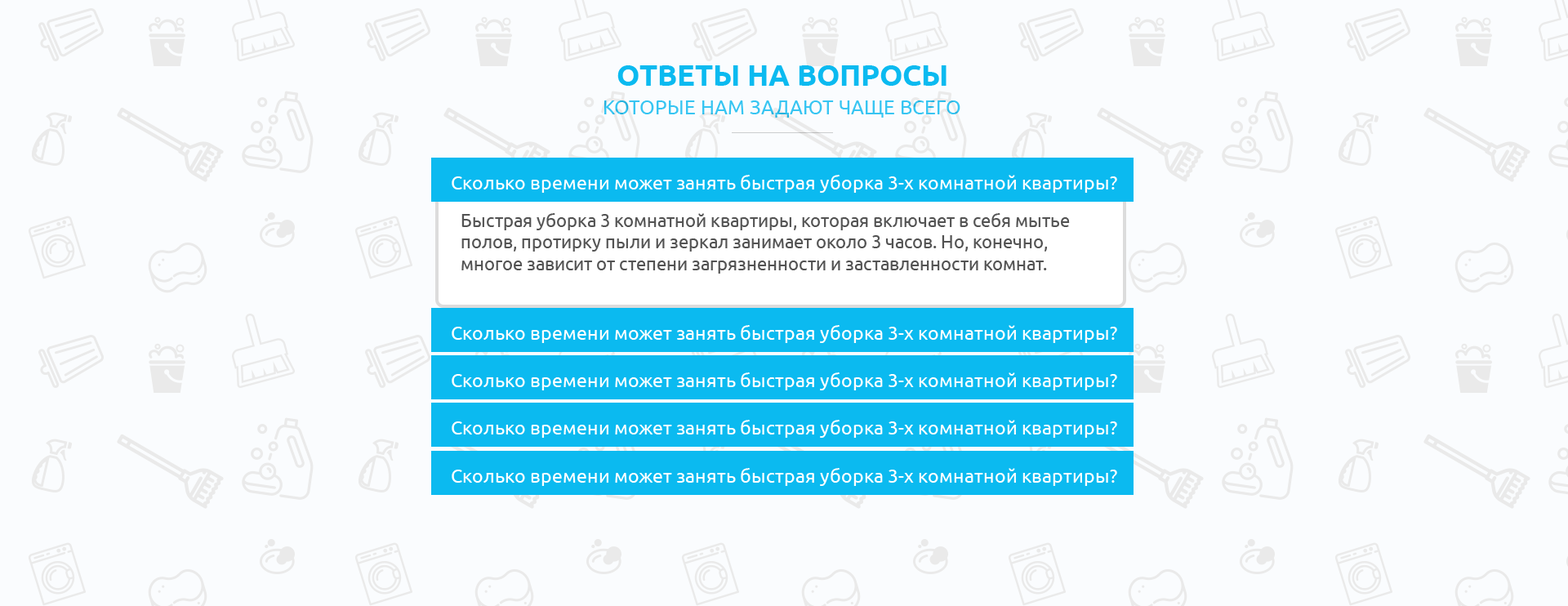
<style>
.page{position:relative;width:1568px;height:606px;background:#fafcfe}
.page>*{position:absolute;margin:0}
.t1{font:29.4px "Ubuntu-Bold";color:#0bbaf0;text-transform:uppercase}
.t2{font:19.6px "Ubuntu";color:#37c5f2;text-transform:uppercase}
.t3{font:18.9px "Ubuntu";color:#ffffff}
.t4{font:18px "Ubuntu";color:#535353}
</style>
<div class="page">
<p class="t1" style="left:617px;top:65px;width:330px;height:21px">Ответы на вопросы</p>
<p class="t2" style="left:604px;top:100px;width:356px;height:18px">Которые нам задают чаще всего</p>
<p class="t3" style="left:452px;top:175px;width:665px;height:18px">Сколько времени может занять быстрая уборка 3-х комнатной квартиры?</p>
<p class="t4" style="left:461px;top:213px;width:609px;height:61px">Быстрая уборка 3 комнатной квартиры, которая включает в себя мытье полов, протирку пыли и зеркал занимает около 3 часов. Но, конечно, многое зависит от степени загрязненности и заставленности комнат.</p>
<p class="t3" style="left:452px;top:325px;width:665px;height:18px">Сколько времени может занять быстрая уборка 3-х комнатной квартиры?</p>
<p class="t3" style="left:452px;top:372px;width:665px;height:18px">Сколько времени может занять быстрая уборка 3-х комнатной квартиры?</p>
<p class="t3" style="left:452px;top:420px;width:665px;height:18px">Сколько времени может занять быстрая уборка 3-х комнатной квартиры?</p>
<p class="t3" style="left:452px;top:468px;width:665px;height:18px">Сколько времени может занять быстрая уборка 3-х комнатной квартиры?</p>
</div>
